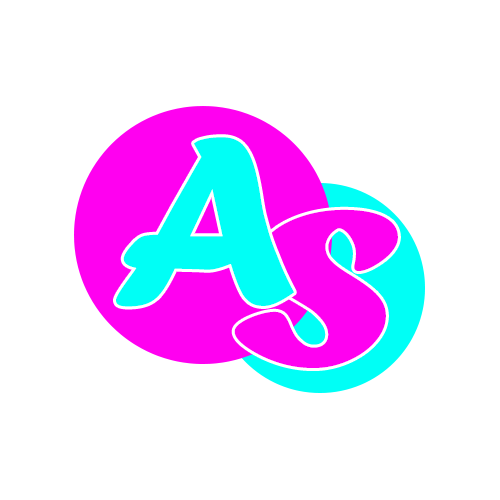
<style>
.page{position:relative;width:500px;height:500px;background:#ffffff}
.page>*{position:absolute;margin:0}
.t1{font:250px "ForteMT";letter-spacing:0.1em;color:#00fff6}
.t2{font:229.2px "ForteMT";color:#ff00f0;scale:1.5 1}
</style>
<div class="page">
<p class="t1" style="left:116px;top:137px;width:178px;height:170px">A</p>
<p class="t2" style="left:234px;top:209px;width:164px;height:159px">S</p>
</div>
